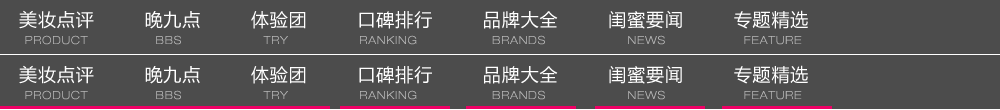
<style>
.page{position:relative;width:1000px;height:110px;background:#4c4c4c}
.page>*{position:absolute;margin:0}
.t1{font:18px "MicrosoftYaHei";letter-spacing:0.05em;color:#ffffff}
.t2{font:11px "HelveticaNeueLTPro-ThEx";letter-spacing:0.1em;color:#b7b7b7}
</style>
<div class="page">
<p class="t1" style="left:19px;top:10px;width:789px;height:19px">美妆点评        晚九点        体验团        口碑排行        品牌大全        闺蜜要闻        专题精选</p>
<p class="t2" style="left:25px;top:35px;width:777px;height:10px">PRODUCT                   BBS                       TRY                    RANKING                     BRANDS                       NEWS                      FEATURE</p>
<p class="t1" style="left:19px;top:65px;width:789px;height:19px">美妆点评        晚九点        体验团        口碑排行        品牌大全        闺蜜要闻        专题精选</p>
<p class="t2" style="left:25px;top:90px;width:777px;height:10px">PRODUCT                   BBS                       TRY                    RANKING                     BRANDS                       NEWS                      FEATURE</p>
</div>
